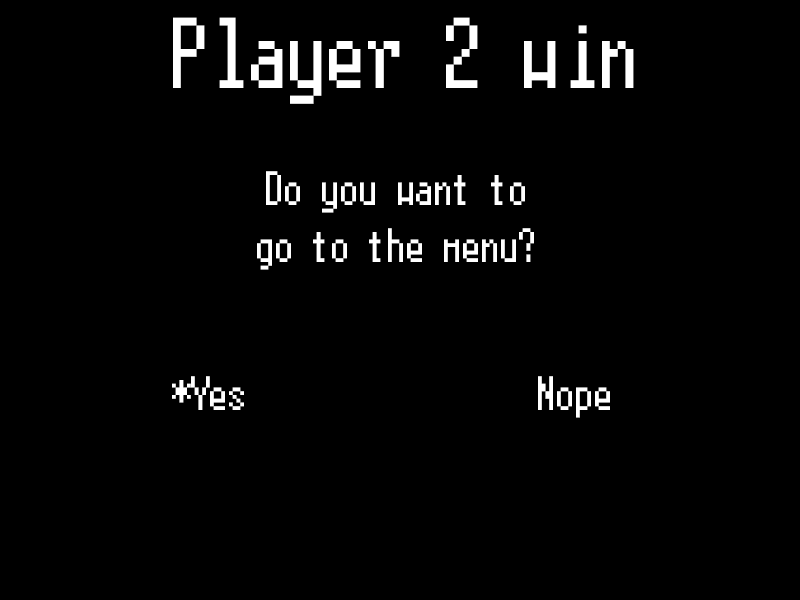
<style>
.page{position:relative;width:800px;height:600px;background:#000000}
.page>*{position:absolute;margin:0}
.t1{font:100px "Terminal";color:#ffffff}
.t2{font:48px "Terminal";color:#ffffff}
</style>
<div class="page">
<p class="t1" style="left:173px;top:17px;width:461px;height:87px">Player 2 win</p>
<p class="t2" style="left:257px;top:171px;width:277px;height:99px;text-align:center">Do you want to go to the menu?</p>
<p class="t2" style="left:172px;top:376px;width:72px;height:34px">*Yes</p>
<p class="t2" style="left:538px;top:376px;width:72px;height:42px">Nope</p>
</div>
